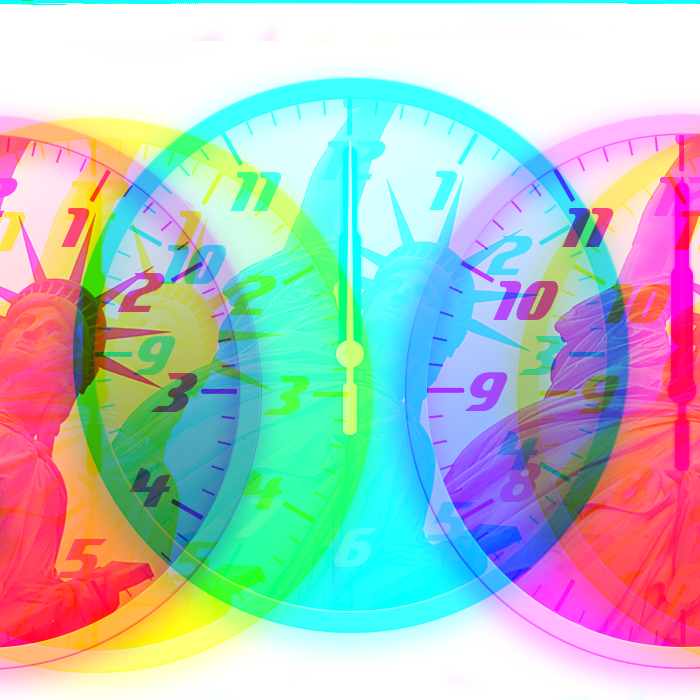
<style>
.page{position:relative;width:700px;height:700px}
.page>*{position:absolute;margin:0}
.t1{font:105px "DeftoneStylus"}
.t2{font:105px "DeftoneStylus";letter-spacing:0.05em}
.t3{font:105px "DeftoneStylus";color:#4affff}
.t4{font:105px "DeftoneStylus";color:#4aa7bc}
.t5{font:105px "DeftoneStylus";color:#4afff7}
</style>
<div class="page">
<p class="t1" style="left:321px;top:137px;width:65px;height:39px">12</p>
<p class="t2" style="left:230px;top:168px;width:52px;height:39px">11</p>
<p class="t3" style="left:429px;top:167px;width:29px;height:39px">1</p>
<p class="t1" style="left:485px;top:232px;width:48px;height:39px">2</p>
<p class="t1" style="left:161px;top:241px;width:65px;height:39px">10</p>
<p class="t1" style="left:132px;top:332px;width:44px;height:39px">9</p>
<p class="t1" style="left:518px;top:332px;width:48px;height:39px">3</p>
<p class="t4" style="left:168px;top:423px;width:41px;height:39px">8</p>
<p class="t1" style="left:498px;top:427px;width:41px;height:39px">4</p>
<p class="t1" style="left:234px;top:494px;width:49px;height:39px">7</p>
<p class="t5" style="left:334px;top:524px;width:44px;height:39px">6</p>
</div>
